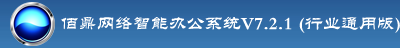
<style>
.page{position:relative;width:400px;height:48px}
.page>*{position:absolute;margin:0}
.t1{font:18px "FZL2JW--GB1-0";color:#ffffff}
</style>
<div class="page">
<p class="t1" style="left:61px;top:16px;width:339px;height:17px">佰鼎网络智能办公系统V7.2.1 (行业通用版)</p>
</div>
